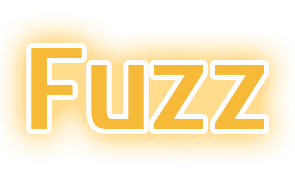
<style>
.page{position:relative;width:295px;height:177px;background:#ffffff}
.page>*{position:absolute;margin:0}
.t1{font:100px "Unispace-Bold";color:#f6ba38}
</style>
<div class="page">
<p class="t1" style="left:31px;top:48px;width:233px;height:81px">Fuzz</p>
</div>
